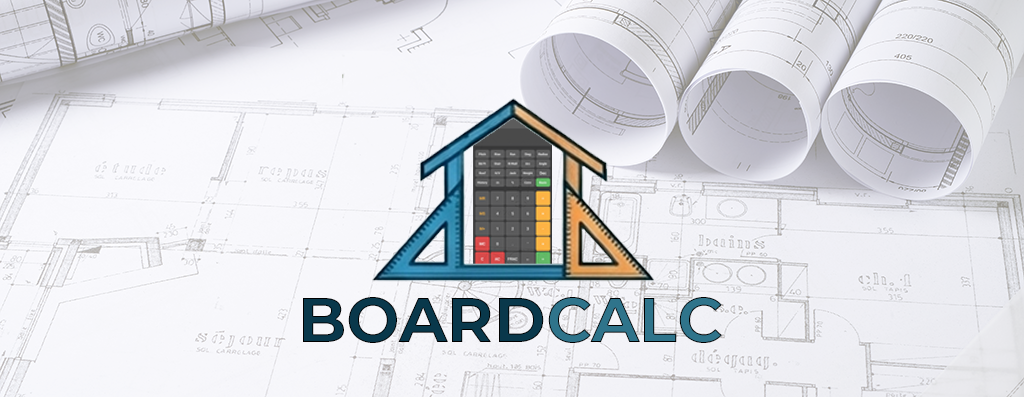
<style>
.page{position:relative;width:1024px;height:397px}
.page>*{position:absolute;margin:0}
.t1{font:63.1px "Montserrat-Bold";color:#09384b}
.t2{font:63.1px "Montserrat-Bold";color:#2f748b}
</style>
<div class="page">
<p class="t1" style="left:303px;top:297px;width:419px;height:46px">BOARD<span class="t2">CALC</span></p>
</div>
